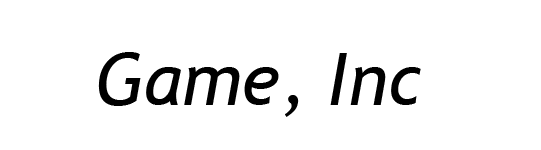
<style>
.page{position:relative;width:541px;height:150px;background:#ffffff}
.page>*{position:absolute;margin:0}
.t1{font:72px "TrebuchetMS-Italic";color:#000000}
</style>
<div class="page">
<p class="t1" style="left:98px;top:52px;width:323px;height:65px">Game, Inc</p>
</div>
